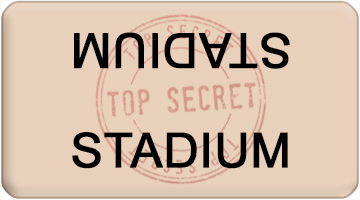
<style>
.page{position:relative;width:360px;height:200px;background:#e8d0bb}
.page>*{position:absolute;margin:0}
.t1{font:48px "ArialMT";color:#000000;font-weight:bold}
</style>
<div class="page">
<p class="t1" style="left:74px;top:32px;width:216px;height:37px;rotate:180deg">STADIUM</p>
<p class="t1" style="left:72px;top:132px;width:216px;height:37px">STADIUM</p>
</div>
